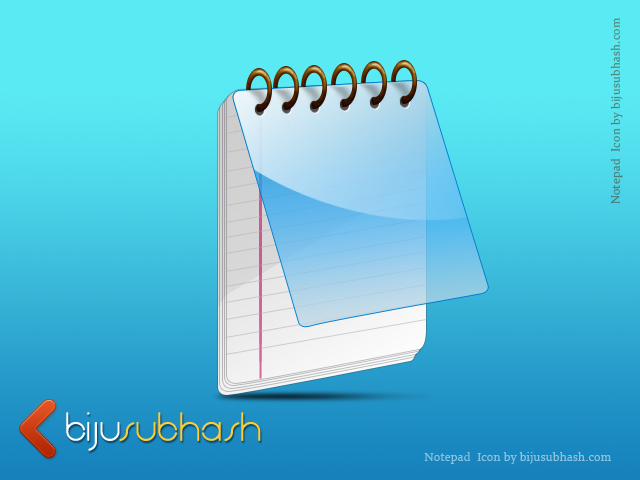
<style>
.page{position:relative;width:640px;height:480px}
.page>*{position:absolute;margin:0}
.t1{font:12px "Constantia";letter-spacing:0.02em;color:#51857a}
.t2{font:12px "Constantia";letter-spacing:0.02em;color:#8cc2df}
</style>
<div class="page">
<p class="t1" style="left:610px;top:18px;width:13px;height:186px;rotate:-90deg">Notepad  Icon by bijusubhash.com</p>
<p class="t2" style="left:424px;top:452px;width:187px;height:12px">Notepad  Icon by bijusubhash.com</p>
</div>
